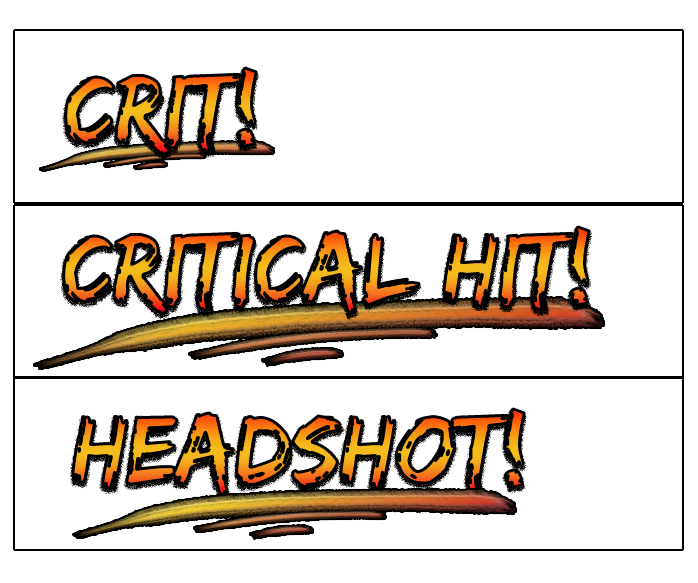
<style>
.page{position:relative;width:698px;height:583px;background:#ffffff}
.page>*{position:absolute;margin:0}
.t1{font:100px "EdoSZ"}
</style>
<div class="page">
<p class="t1" style="left:65px;top:68px;width:192px;height:87px">Crit!</p>
<p class="t1" style="left:63px;top:227px;width:527px;height:88px">Critical Hit!</p>
<p class="t1" style="left:72px;top:409px;width:453px;height:88px">Headshot!</p>
</div>
